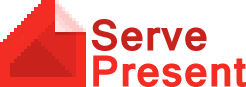
<style>
.page{position:relative;width:246px;height:87px;background:#ffffff}
.page>*{position:absolute;margin:0}
.t1{font:48px/36px "Latha-Bold";color:#f32c24}
.t2{font:48px/36px "Latha-Bold";color:#c7221b}
</style>
<div class="page">
<p class="t1" style="left:91px;top:19px;width:155px;height:68px"><span class="t2">Serve<br></span>Present</p>
</div>
